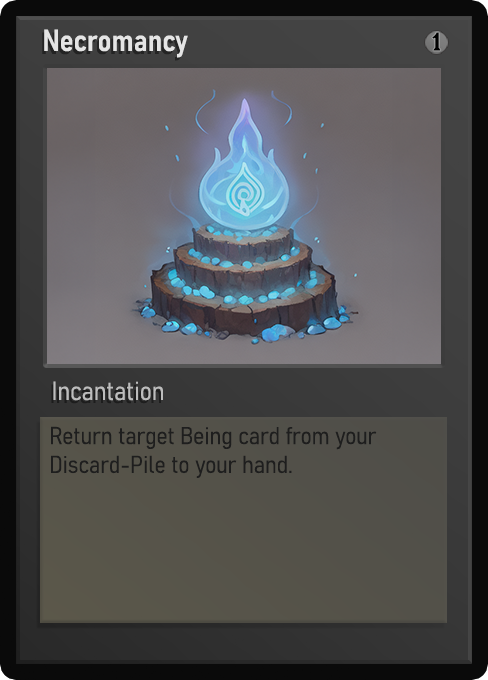
<style>
.page{position:relative;width:488px;height:680px}
.page>*{position:absolute;margin:0}
.t1{font:30px "Bahnschrift-SemiBoldSemiCondensed";color:#f2f2f2;font-weight:bold}
.t2{font:25px "WTRRoycroft";color:#000000;font-weight:bold;scale:1.09 1}
.t3{font:26px "Bahnschrift-LightSemiCondensed";color:#c8c8c8;font-weight:bold}
.t4{font:24px "Bahnschrift-LightSemiCondensed";color:#1e1e1e;font-weight:bold}
</style>
<div class="page">
<p class="t1" style="left:44px;top:29px;width:144px;height:29px;opacity:0.9">Necromancy</p>
<p class="t2" style="left:432px;top:32px;width:9px;height:19px">1</p>
<p class="t3" style="left:53px;top:381px;width:110px;height:20px;opacity:0.9">Incantation</p>
<p class="t4" style="left:51px;top:426px;width:326px;height:52px">Return target Being card from your Discard-Pile to your hand.</p>
</div>
